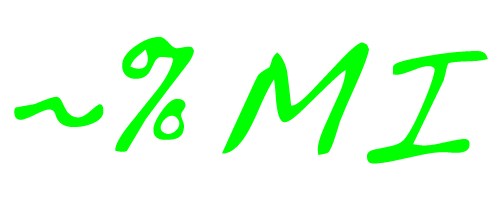
<style>
.page{position:relative;width:500px;height:200px;background:#ffffff}
.page>*{position:absolute;margin:0}
.t1{font:277.8px "Handwriting-Dakota";color:#00ff00}
</style>
<div class="page">
<p class="t1" style="left:14px;top:37px;width:474px;height:127px">~% MI</p>
</div>
